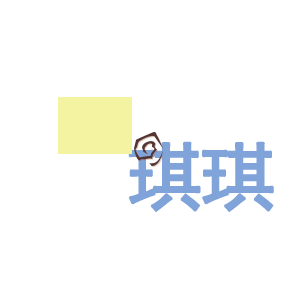
<style>
.page{position:relative;width:300px;height:300px;background:#ffffff}
.page>*{position:absolute;margin:0}
.t1{font:75px "SimHei";letter-spacing:-0.05em;color:#80a3d9;font-weight:bold}
</style>
<div class="page">
<p class="t1" style="left:128px;top:141px;width:146px;height:72px">琪琪</p>
</div>
